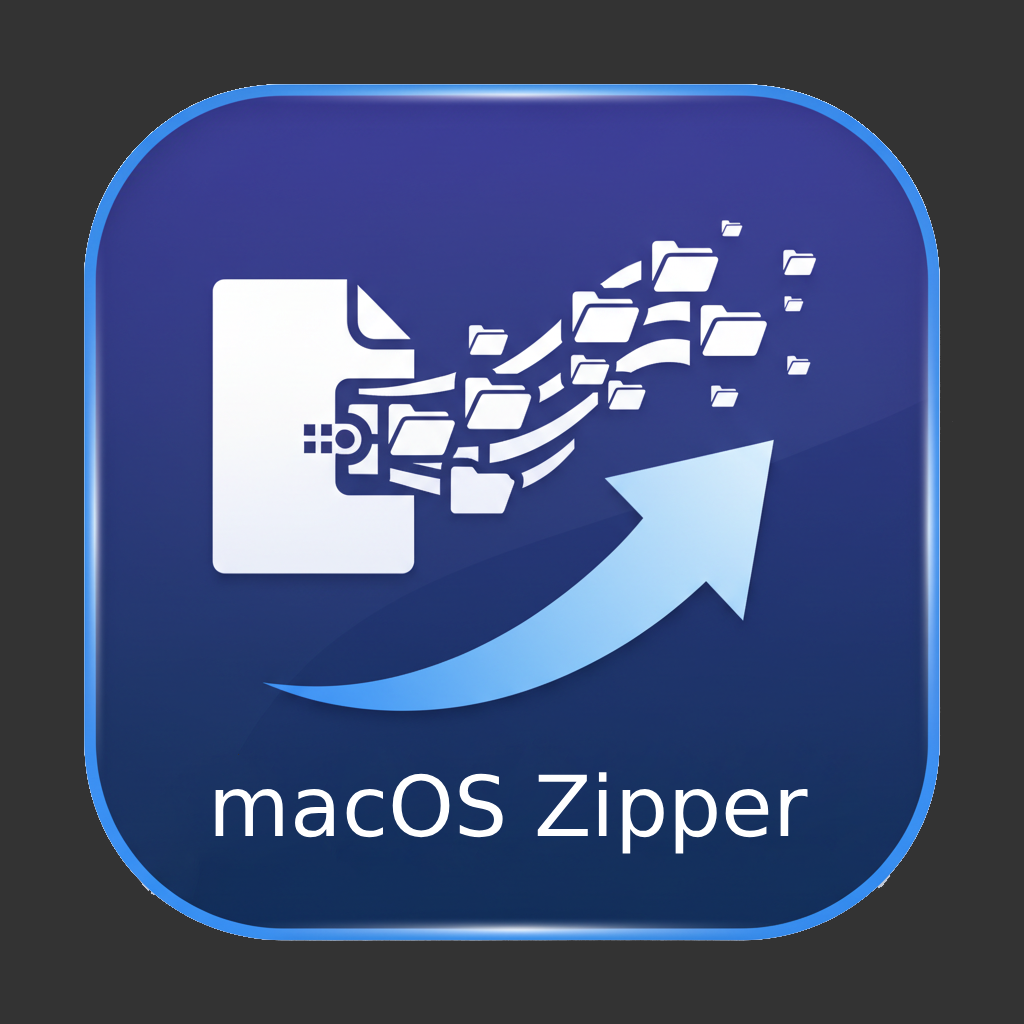
<style>
.page{position:relative;width:1024px;height:1024px;background:#333333}
.page>*{position:absolute;margin:0}
.t1{font:84px "DejaVuSans";color:#ffffff}
</style>
<div class="page">
<p class="t1" style="left:215px;top:772px;width:593px;height:82px">macOS Zipper</p>
</div>
